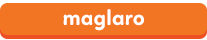
<style>
.page{position:relative;width:207px;height:40px;background:#f27524}
.page>*{position:absolute;margin:0}
.t1{font:22px "Linotte-Bold";color:#ffffff}
</style>
<div class="page">
<p class="t1" style="left:63px;top:9px;width:81px;height:22px">maglaro</p>
</div>
